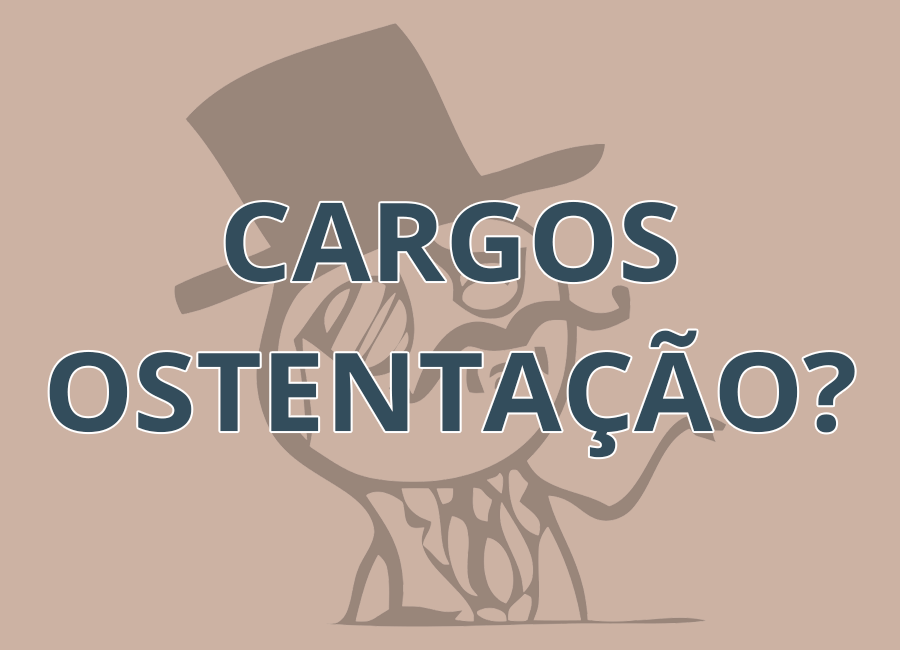
<style>
.page{position:relative;width:900px;height:650px;background:#ccb2a3}
.page>*{position:absolute;margin:0}
.t1{font:109px/15px "OpenSans-Bold";color:#334d5c;scale:1.04 1}
</style>
<div class="page">
<p class="t1" style="left:49px;top:201px;width:806px;height:257px;text-align:center">CARGOS<br><br><br><br><br><br><br><br><br><br>OSTENTAÇÃO?</p>
</div>
